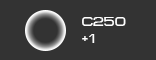
<style>
.page{position:relative;width:156px;height:60px;background:#333333}
.page>*{position:absolute;margin:0}
.t1{font:13px "MetroDF";color:#ffffff}
.t2{font:13.4px "MetroDF";color:#ffffff}
</style>
<div class="page">
<p class="t1" style="left:82px;top:17px;width:44px;height:9px">c250</p>
<p class="t2" style="left:82px;top:34px;width:13px;height:9px">+1</p>
</div>
